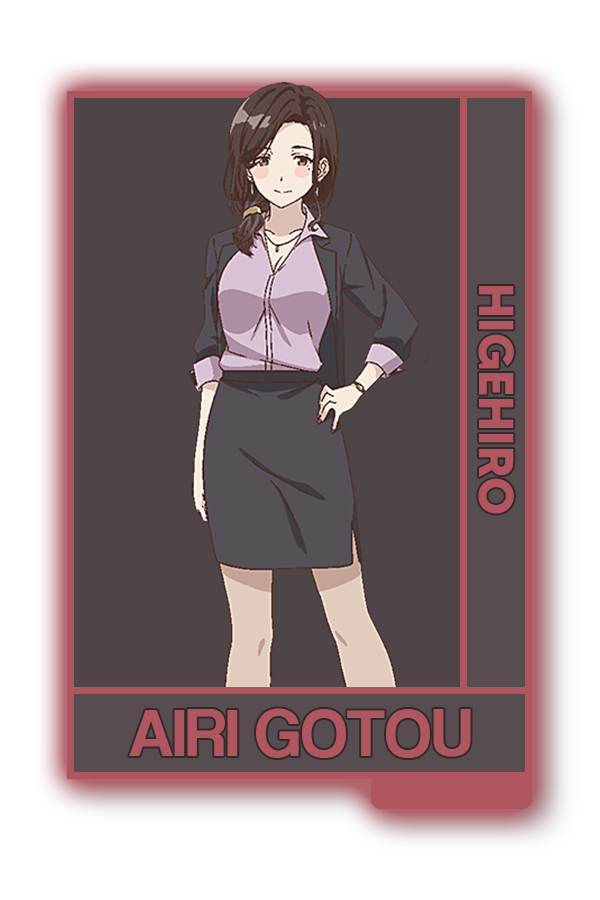
<style>
.page{position:relative;width:600px;height:900px;background:#4f4448}
.page>*{position:absolute;margin:0}
.t1{font:48.8px "MADETOMMY-Bold";color:#b05661}
.t2{font:69px "CoolveticaRg-Regular";color:#b05661}
</style>
<div class="page">
<p class="t1" style="left:478px;top:286px;width:36px;height:228px;rotate:90deg">HIGEHIRO</p>
<p class="t2" style="left:129px;top:708px;width:342px;height:50px">AIRI GOTOU</p>
</div>
